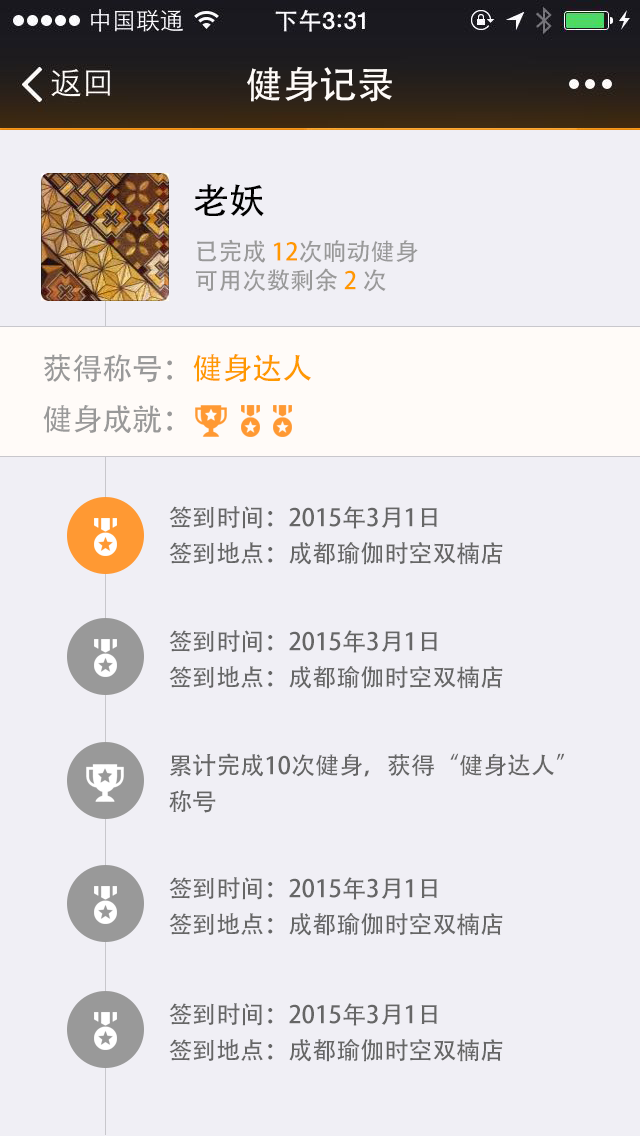
<style>
.page{position:relative;width:640px;height:1136px;background:#f0eff5}
.page>*{position:absolute;margin:0}
.t1{font:37.2px "AdobeHeitiStd-Regular";color:#fffbf8}
.t2{font:36px "AdobeHeitiStd-Regular";color:#000000}
.t3{font:24px "AdobeHeitiStd-Regular";color:#999999}
.t4{font:24px "AdobeHeitiStd-Regular";color:#ff9900}
.t5{font:30px "AdobeHeitiStd-Regular";color:#999999}
.t6{font:30px "AdobeHeitiStd-Regular";color:#ff9900}
.t7{font:24px/36px "AdobeHeitiStd-Regular";color:#666666}
</style>
<div class="page">
<p class="t1" style="left:247px;top:66px;width:145px;height:36px">健身记录</p>
<p class="t2" style="left:194px;top:184px;width:70px;height:33px">老妖</p>
<p class="t3" style="left:196px;top:239px;width:222px;height:53px">已完成 <span class="t4">12</span>次响动健身<br>可用次数剩余 <span class="t4">2 </span>次</p>
<p class="t5" style="left:44px;top:354px;width:267px;height:29px">获得称号：<span class="t6">健身达人</span></p>
<p class="t5" style="left:43px;top:405px;width:129px;height:28px">健身成就：</p>
<p class="t7" style="left:169px;top:506px;width:334px;height:59px">签到时间：2015年3月1日<br>签到地点：成都瑜伽时空双楠店</p>
<p class="t7" style="left:169px;top:630px;width:334px;height:59px">签到时间：2015年3月1日<br>签到地点：成都瑜伽时空双楠店</p>
<p class="t7" style="left:169px;top:753px;width:396px;height:60px">累计完成10次健身，获得“健身达人”<br>称号</p>
<p class="t7" style="left:169px;top:877px;width:334px;height:59px">签到时间：2015年3月1日<br>签到地点：成都瑜伽时空双楠店</p>
<p class="t7" style="left:169px;top:1003px;width:334px;height:59px">签到时间：2015年3月1日<br>签到地点：成都瑜伽时空双楠店</p>
</div>
